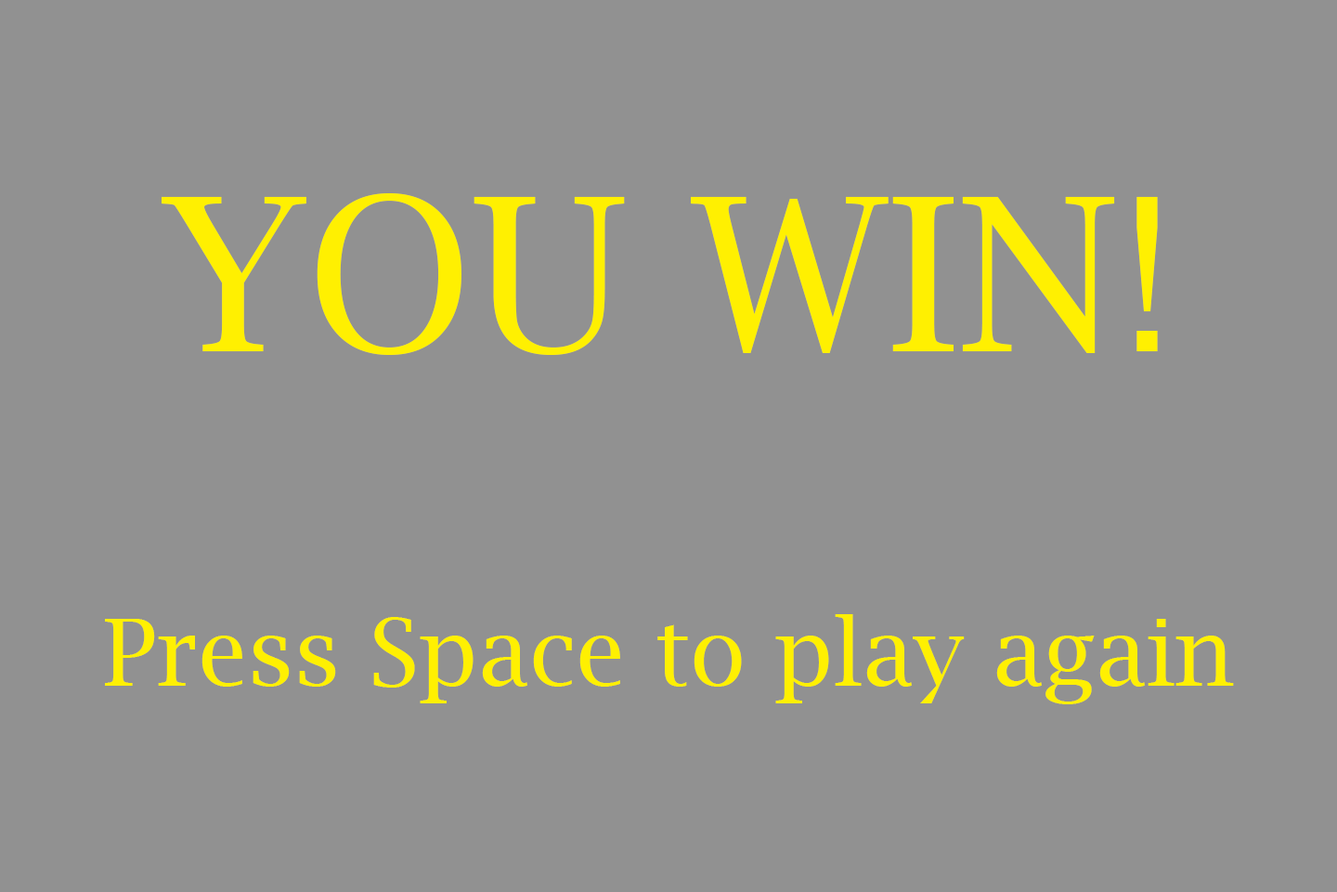
<style>
.page{position:relative;width:1337px;height:892px;background:#919191}
.page>*{position:absolute;margin:0}
.t1{font:92.9px "LucidaBright";color:#fff001}
.t2{font:139.3px "Calibri";color:#ff0101}
.t3{font:213.6px "LucidaBright";color:#fff001}
</style>
<div class="page">
<p class="t1" style="left:105px;top:192px;width:1129px;height:512px;text-align:center"><span class="t2"><br></span><span class="t3">YOU WIN!<br></span><br><br>Press Space to play again</p>
</div>
